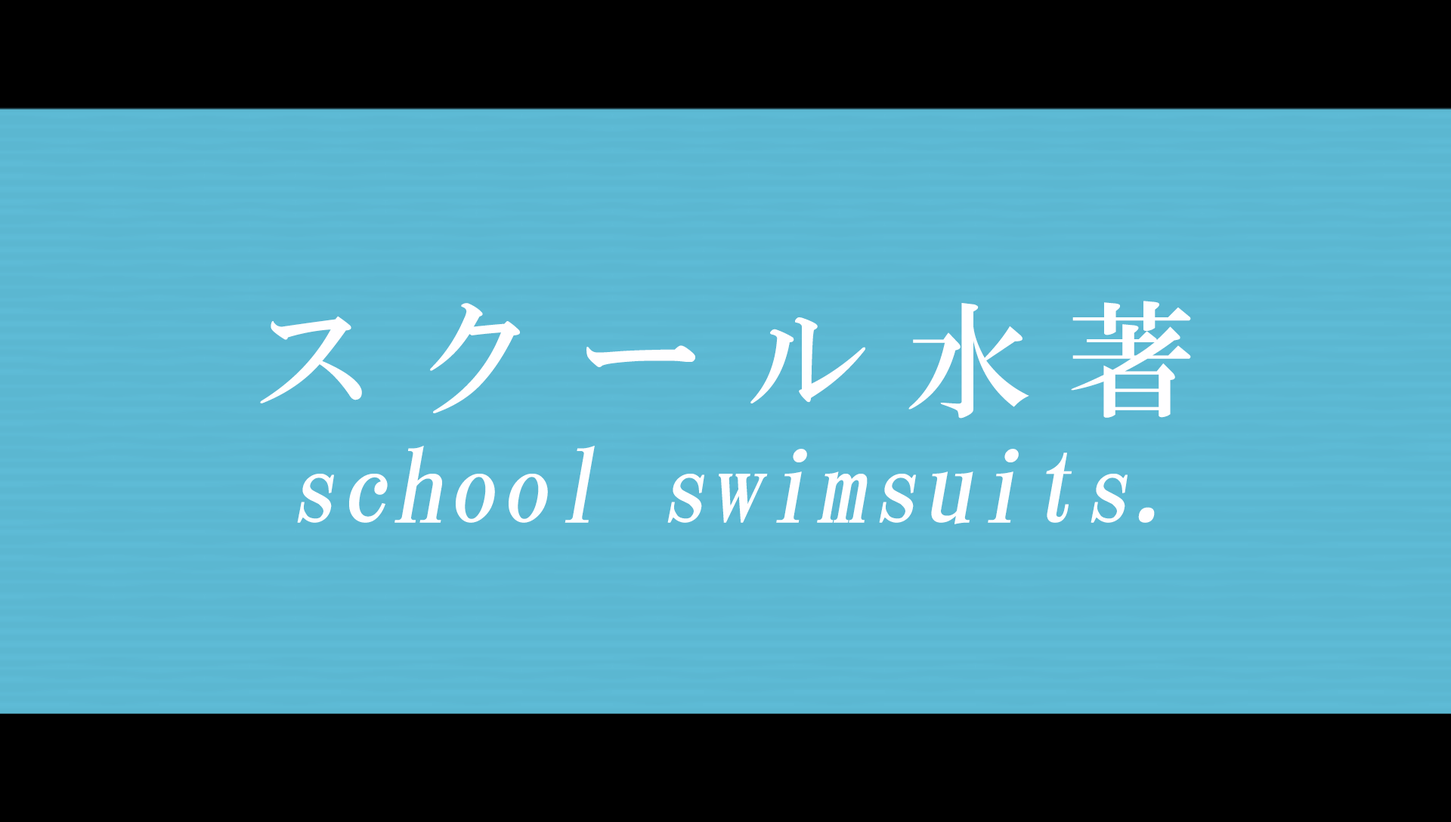
<style>
.page{position:relative;width:1451px;height:822px;background:#5bb7d1}
.page>*{position:absolute;margin:0}
.t1{font:126.9px "HGMinchoB";letter-spacing:0.29em;color:#fffeff}
.t2{font:100.7px "HGMinchoB";letter-spacing:0.025em;color:#fffeff;font-style:italic}
</style>
<div class="page">
<p class="t1" style="left:260px;top:301px;width:931px;height:118px">スクール水著</p>
<p class="t2" style="left:297px;top:446px;width:857px;height:78px">school swimsuits.</p>
</div>
